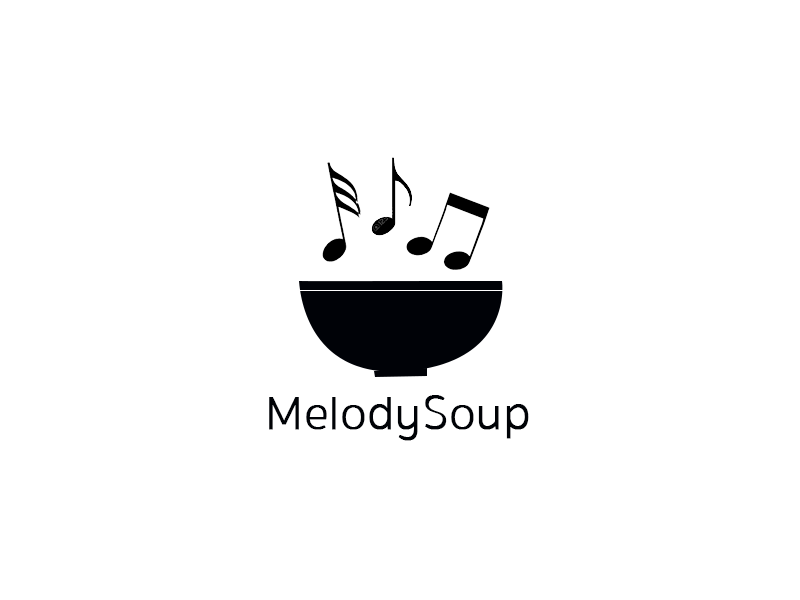
<style>
.page{position:relative;width:800px;height:600px;background:#ffffff}
.page>*{position:absolute;margin:0}
.t1{font:48px "SukhumvitSet-Thin";color:#000206;font-weight:bold}
</style>
<div class="page">
<p class="t1" style="left:269px;top:395px;width:260px;height:46px">MelodySoup</p>
</div>
